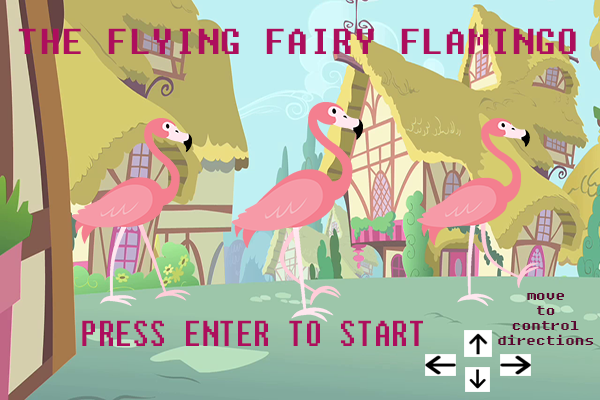
<style>
.page{position:relative;width:600px;height:400px}
.page>*{position:absolute;margin:0}
.t1{font:36px "Fixedsys";color:#ad0e5d}
.t2{font:12.6px "Fixedsys";color:#5b0831;scale:1.23 1}
.t3{font:36px "Fixedsys";color:#ad0e5d;scale:0.77 1}
</style>
<div class="page">
<p class="t1" style="left:18px;top:28px;width:558px;height:26px">THE FLYING FAIRY FLAMINGO</p>
<p class="t2" style="left:498px;top:293px;width:95px;height:52px;text-align:center">move<br>to<br>control<br>directions</p>
<p class="t3" style="left:82px;top:320px;width:341px;height:26px">PRESS ENTER TO START</p>
</div>
